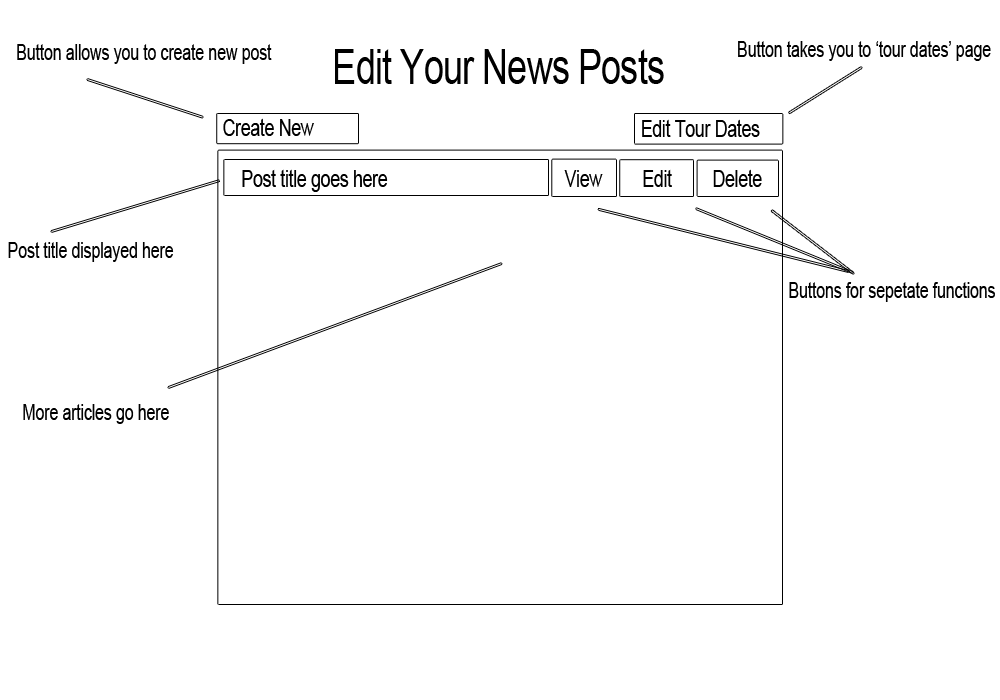
<style>
.page{position:relative;width:1000px;height:700px;background:#ffffff}
.page>*{position:absolute;margin:0}
.t1{font:22.3px "ArialMT";letter-spacing:-0.02em;color:#000000;scale:0.73 1}
.t2{font:48.7px "ArialMT";letter-spacing:-0.02em;color:#000000;scale:0.73 1}
.t3{font:24.4px "ArialMT";letter-spacing:-0.02em;color:#000000;scale:0.73 1}
</style>
<div class="page">
<p class="t1" style="left:738px;top:41px;width:253px;height:20px">Button takes you to ‘tour dates’ page</p>
<p class="t1" style="left:17px;top:44px;width:255px;height:20px">Button allows you to create new post</p>
<p class="t2" style="left:335px;top:49px;width:329px;height:35px">Edit Your News Posts</p>
<p class="t3" style="left:223px;top:118px;width:91px;height:18px">Create New</p>
<p class="t3" style="left:642px;top:119px;width:118px;height:18px">Edit Tour Dates</p>
<p class="t3" style="left:242px;top:169px;width:146px;height:23px">Post title goes here</p>
<p class="t3" style="left:564px;top:170px;width:39px;height:17px">View</p>
<p class="t3" style="left:643px;top:169px;width:29px;height:18px">Edit</p>
<p class="t3" style="left:713px;top:169px;width:49px;height:18px">Delete</p>
<p class="t1" style="left:8px;top:242px;width:166px;height:20px">Post title displayed here</p>
<p class="t1" style="left:789px;top:282px;width:206px;height:20px">Buttons for sepetate functions</p>
<p class="t1" style="left:23px;top:404px;width:146px;height:20px">More articles go here</p>
</div>
